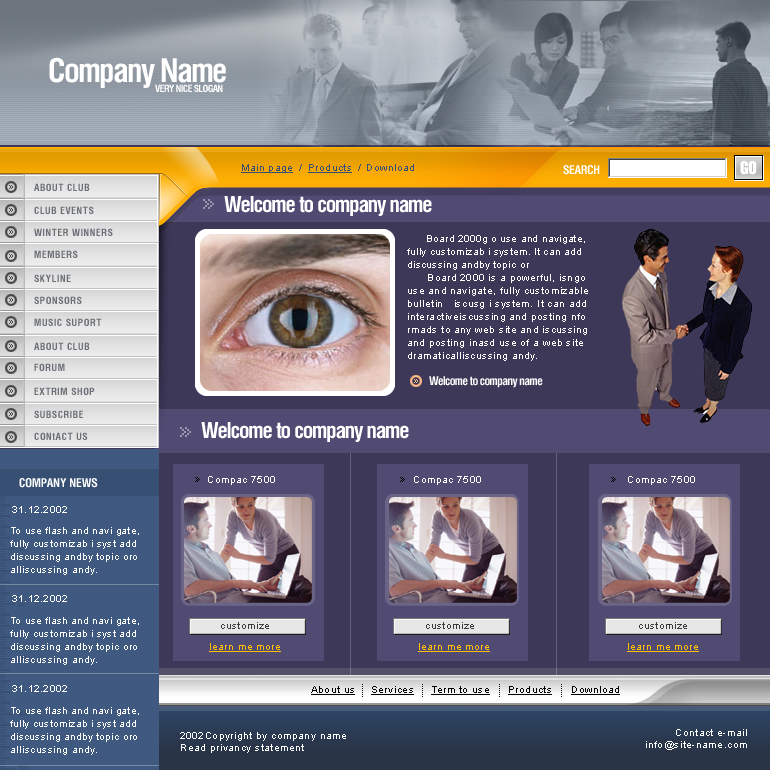
<style>
.page{position:relative;width:770px;height:770px}
.page>*{position:absolute;margin:0}
.t1{font:33px "HeliosCond-Bold";letter-spacing:-0.05em;color:#ffffff}
.t2{font:10px "HeliosCond-Bold";letter-spacing:-0.05em;color:#ffffff}
.t3{font:10px "ArialMT";letter-spacing:0.06em;color:#384f74;text-decoration:underline}
.t4{font:10px "ArialMT";letter-spacing:0.06em;color:#384f74}
.t5{font:12px "HeliosCond-Bold";letter-spacing:-0.02em;color:#ffffff}
.t6{font:10px "HeliosCond-Bold";letter-spacing:0.06em;color:#6a6e75}
.t7{font:22px "HeliosCond-Bold";letter-spacing:-0.05em;color:#ffffff}
.t8{font:10px/13px "ArialMT";letter-spacing:0.06em;color:#ffffff}
.t9{font:10px/13px "ArialMT";letter-spacing:0.04em;color:#ffffff}
.t10{font:12px "HeliosCond-Bold";letter-spacing:-0.05em;color:#ffffff}
.t11{font:12px "HeliosCond-Bold";color:#ffffff}
.t12{font:10px "ArialMT";letter-spacing:0.06em;color:#ffffff}
.t13{font:10px "ArialMT";letter-spacing:0.06em;color:#3c3c3c}
.t14{font:10px "ArialMT";letter-spacing:0.06em;color:#ffc000;text-decoration:underline}
.t15{font:10px "ArialMT";letter-spacing:0.06em;color:#000000;text-decoration:underline}
.t16{font:10px/12px "ArialMT";letter-spacing:0.06em;color:#ffffff}
</style>
<div class="page">
<p class="t1" style="left:49px;top:57px;width:177px;height:31px">Company Name</p>
<p class="t2" style="left:155px;top:84px;width:68px;height:8px">VERY NICE SLOGAN</p>
<p class="t3" style="left:241px;top:164px;width:52px;height:9px">Main page</p>
<p class="t4" style="left:299px;top:164px;width:3px;height:7px">/</p>
<p class="t3" style="left:308px;top:164px;width:44px;height:9px">Products</p>
<p class="t4" style="left:358px;top:164px;width:3px;height:7px">/</p>
<p class="t4" style="left:367px;top:164px;width:47px;height:7px">Download</p>
<p class="t5" style="left:563px;top:165px;width:37px;height:10px">SEARCH</p>
<p class="t6" style="left:34px;top:183px;width:56px;height:8px">ABOUT CLUB</p>
<p class="t7" style="left:224px;top:196px;width:208px;height:20px">Welcome to company name</p>
<p class="t6" style="left:34px;top:206px;width:60px;height:8px">CLUB EVENTS</p>
<p class="t6" style="left:34px;top:228px;width:79px;height:8px">WINTER WINNERS</p>
<p class="t8" style="left:407px;top:235px;width:181px;height:126px"><span class="t9">      Board 2000g o use and navigate, <br>fully customizab i system. It can add <br>discussing andby topic or <br></span>      Board 2000 is a powerful, isngo <br>use and navigate, fully customizable  <br>bulletin   iscusg i system. It can add <br>interactiveiscussing and posting nfo<br>rmads to any web site and iscussing <br>and posting inasd use of a web site <br>dramaticalliscussing andy.</p>
<p class="t6" style="left:34px;top:250px;width:44px;height:8px">MEMBERS</p>
<p class="t6" style="left:34px;top:274px;width:37px;height:8px">SKYLINE</p>
<p class="t6" style="left:34px;top:296px;width:48px;height:8px">SPONSORS</p>
<p class="t6" style="left:34px;top:318px;width:68px;height:8px">MUSIC SUPORT</p>
<p class="t6" style="left:34px;top:342px;width:56px;height:8px">ABOUT CLUB</p>
<p class="t6" style="left:34px;top:363px;width:31px;height:8px">FORUM</p>
<p class="t10" style="left:429px;top:376px;width:114px;height:12px">Welcome to company name</p>
<p class="t6" style="left:34px;top:387px;width:61px;height:8px">EXTRIM SHOP</p>
<p class="t6" style="left:34px;top:410px;width:49px;height:8px">SUBSCRIBE</p>
<p class="t7" style="left:201px;top:422px;width:208px;height:20px">Welcome to company name</p>
<p class="t6" style="left:34px;top:432px;width:54px;height:8px">CONtACT US</p>
<p class="t11" style="left:19px;top:478px;width:79px;height:10px">COMPANY NEWS</p>
<p class="t12" style="left:208px;top:476px;width:67px;height:9px">Compac 7500</p>
<p class="t12" style="left:414px;top:476px;width:67px;height:9px">Compac 7500</p>
<p class="t12" style="left:628px;top:476px;width:67px;height:9px">Compac 7500</p>
<p class="t12" style="left:12px;top:506px;width:55px;height:7px">31.12.2002</p>
<p class="t9" style="left:10px;top:527px;width:129px;height:48px">To use flash and navi gate, <br>fully customizab i syst add <br>discussing andby topic or<span class="t8">o<br>alliscussing andy.</span></p>
<p class="t12" style="left:12px;top:595px;width:55px;height:7px">31.12.2002</p>
<p class="t9" style="left:10px;top:617px;width:129px;height:48px">To use flash and navi gate, <br>fully customizab i syst add <br>discussing andby topic or<span class="t8">o<br>alliscussing andy.</span></p>
<p class="t13" style="left:221px;top:622px;width:48px;height:7px">customize</p>
<p class="t13" style="left:426px;top:622px;width:48px;height:7px">customize</p>
<p class="t13" style="left:639px;top:622px;width:48px;height:7px">customize</p>
<p class="t14" style="left:209px;top:643px;width:72px;height:9px">learn me more</p>
<p class="t14" style="left:418px;top:643px;width:72px;height:9px">learn me more</p>
<p class="t14" style="left:627px;top:643px;width:72px;height:9px">learn me more</p>
<p class="t12" style="left:12px;top:685px;width:55px;height:7px">31.12.2002</p>
<p class="t15" style="left:311px;top:686px;width:44px;height:9px">About us</p>
<p class="t15" style="left:371px;top:686px;width:43px;height:9px">Services</p>
<p class="t15" style="left:431px;top:686px;width:59px;height:9px">Term to use</p>
<p class="t15" style="left:508px;top:686px;width:44px;height:9px">Products</p>
<p class="t15" style="left:571px;top:686px;width:49px;height:9px">Download</p>
<p class="t9" style="left:10px;top:707px;width:129px;height:48px">To use flash and navi gate, <br>fully customizab i syst add <br>discussing andby topic or<span class="t8">o<br>alliscussing andy.</span></p>
<p class="t16" style="left:180px;top:732px;width:166px;height:21px">2002Copyright by company name<br>Read privancy statement</p>
<p class="t16" style="left:646px;top:729px;width:101px;height:21px;text-align:right">Contact e-mail<br>info@site-name.com</p>
</div>
